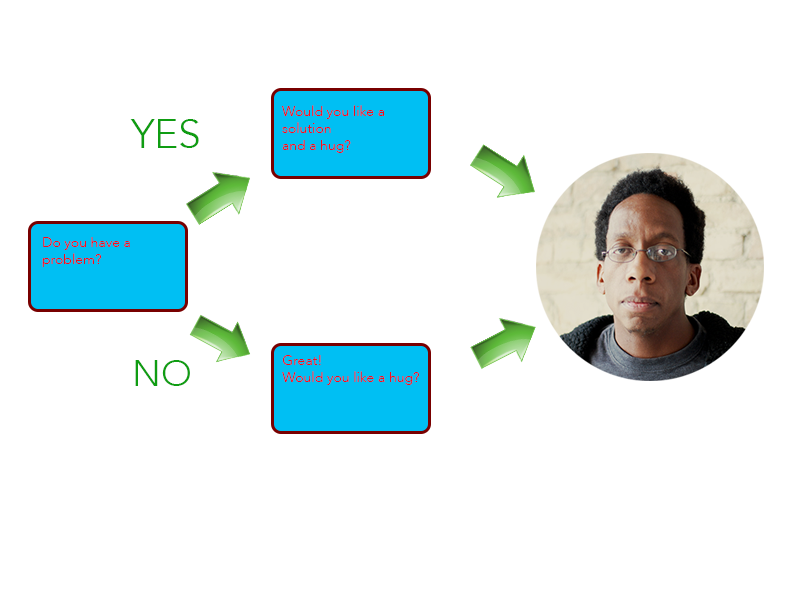
<style>
.page{position:relative;width:800px;height:600px;background:#ffffff}
.page>*{position:absolute;margin:0}
.t1{font:14px "Avenir-Light";color:#f10d1d}
.t2{font:40.6px "Avenir-Light";color:#0f9d12}
.t3{font:37px "Avenir-Light";color:#0f9d12}
</style>
<div class="page">
<p class="t1" style="left:281px;top:105px;width:104px;height:48px">Would you like a <br>solution<br>and a hug?</p>
<p class="t2" style="left:130px;top:119px;width:69px;height:29px">YES</p>
<p class="t1" style="left:42px;top:237px;width:88px;height:30px">Do you have a <br>problem?</p>
<p class="t3" style="left:135px;top:360px;width:55px;height:26px">NO</p>
<p class="t1" style="left:282px;top:355px;width:138px;height:30px">Great!<br>Would you like a hug?</p>
</div>
